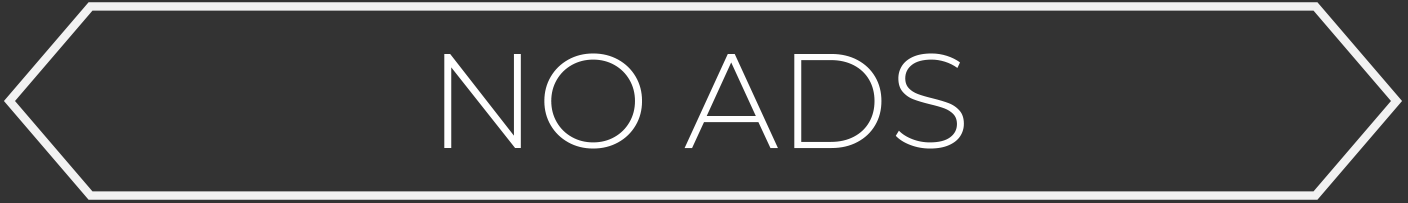
<style>
.page{position:relative;width:1408px;height:203px;background:#333333}
.page>*{position:absolute;margin:0}
.t1{font:134.1px "Montserrat-Light";color:#ffffff}
</style>
<div class="page">
<p class="t1" style="left:444px;top:53px;width:520px;height:96px">NO ADS</p>
</div>
